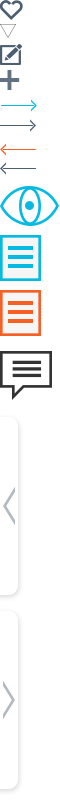
<style>
.page{position:relative;width:60px;height:800px;background:#ffffff}
.page>*{position:absolute;margin:0}
.t1{font:38px "MicrosoftYaHei-Bold";color:#637282}
</style>
<div class="page">
<p class="t1" style="left:0px;top:70px;width:20px;height:20px">+</p>
</div>
